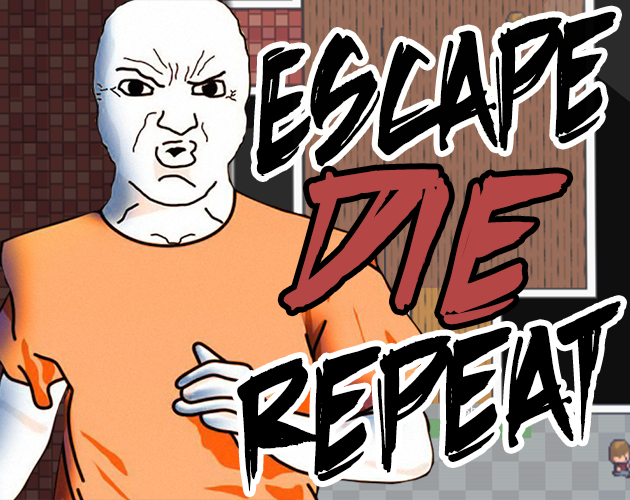
<style>
.page{position:relative;width:630px;height:500px}
.page>*{position:absolute;margin:0}
.t1{font:200px "DeathRattleBB";color:#000000;scale:0.81 1}
.t2{font:250px "DeathRattleBB";color:#b44646}
.t3{font:200px "DeathRattleBB";color:#000000;scale:0.91 1}
</style>
<div class="page">
<p class="t1" style="left:256px;top:11px;width:360px;height:165px;rotate:-6deg">Escape</p>
<p class="t2" style="left:283px;top:169px;width:285px;height:156px;rotate:4deg">Die</p>
<p class="t3" style="left:237px;top:301px;width:385px;height:191px;rotate:-8deg">Repeat</p>
</div>
